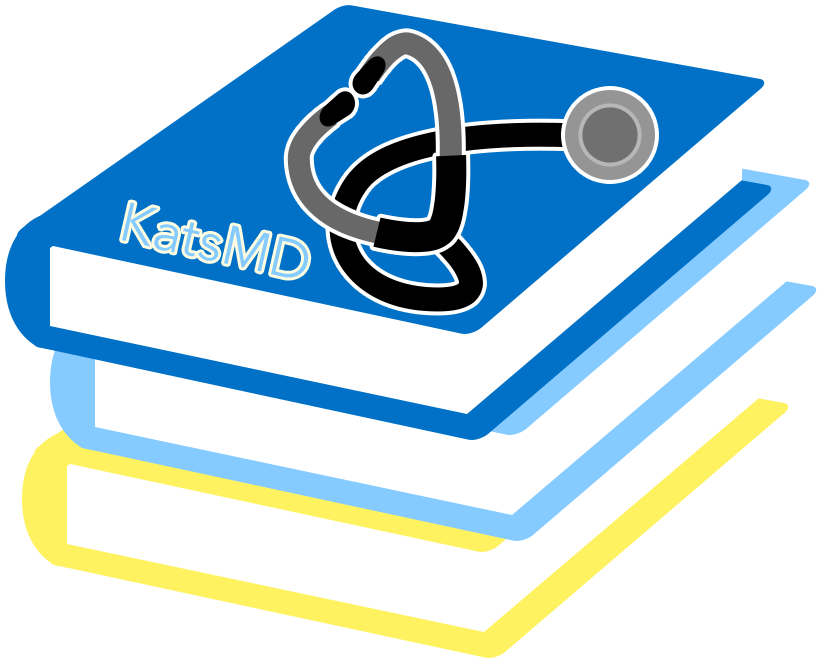
<style>
.page{position:relative;width:823px;height:667px;background:#ffffff}
.page>*{position:absolute;margin:0}
.t1{font:54.6px "AvenirNext-Regular";color:#86cbff}
</style>
<div class="page">
<p class="t1" style="left:122px;top:202px;width:187px;height:76px;rotate:13deg">KatsMD</p>
</div>
